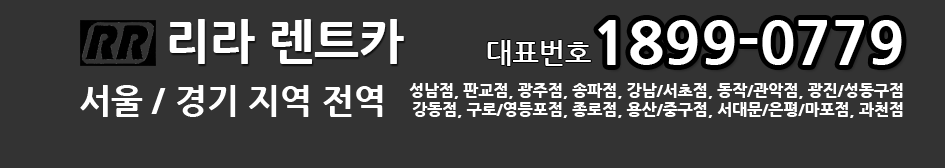
<style>
.page{position:relative;width:945px;height:168px;background:#333333}
.page>*{position:absolute;margin:0}
.t1{font:48px "NanumGothicExtraBold";color:#ffffff}
.t2{font:60px "NanumGothicExtraBold";color:#ffffff}
.t3{font:28px "NanumGothicBold";color:#ffffff}
.t4{font:34px "NanumGothicExtraBold";color:#ffffff}
.t5{font:16px "NanumGothicExtraBold";color:#ffffff}
</style>
<div class="page">
<p class="t1" style="left:169px;top:19px;width:235px;height:45px">리라 렌트카</p>
<p class="t2" style="left:598px;top:20px;width:304px;height:45px">1899-0779</p>
<p class="t3" style="left:487px;top:40px;width:104px;height:26px">대표번호</p>
<p class="t4" style="left:80px;top:85px;width:303px;height:32px">서울 / 경기 지역 전역</p>
<p class="t5" style="left:409px;top:83px;width:494px;height:35px;text-align:right">성남점, 판교점, 광주점, 송파점, 강남/서초점, 동작/관악점, 광진/성동구점<br>강동점, 구로/영등포점, 종로점, 용산/중구점, 서대문/은평/마포점, 과천점</p>
</div>
